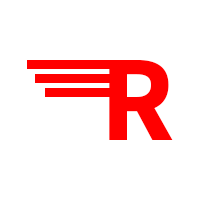
<style>
.page{position:relative;width:200px;height:200px;background:#ffffff}
.page>*{position:absolute;margin:0}
.t1{font:121.5px "SourceSansPro-Bold";letter-spacing:-0.025em;color:#ff0000}
</style>
<div class="page">
<p class="t1" style="left:109px;top:60px;width:64px;height:80px">R</p>
</div>
